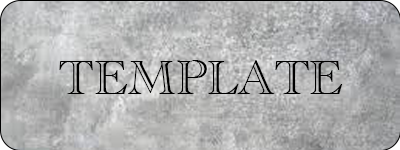
<style>
.page{position:relative;width:400px;height:150px}
.page>*{position:absolute;margin:0}
.t1{font:50px "AcademyEngravedLetPlain";color:#000000}
</style>
<div class="page">
<p class="t1" style="left:59px;top:60px;width:284px;height:34px">TEMPLATE</p>
</div>
